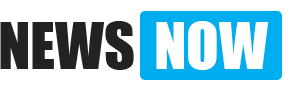
<style>
.page{position:relative;width:300px;height:90px;background:#ffffff}
.page>*{position:absolute;margin:0}
.t1{font:60px "Impact";color:#222222}
.t2{font:60px "Impact";color:#ffffff}
</style>
<div class="page">
<p class="t1" style="left:0px;top:21px;width:134px;height:49px">NEWS</p>
<p class="t2" style="left:156px;top:21px;width:113px;height:49px">NOW</p>
</div>
